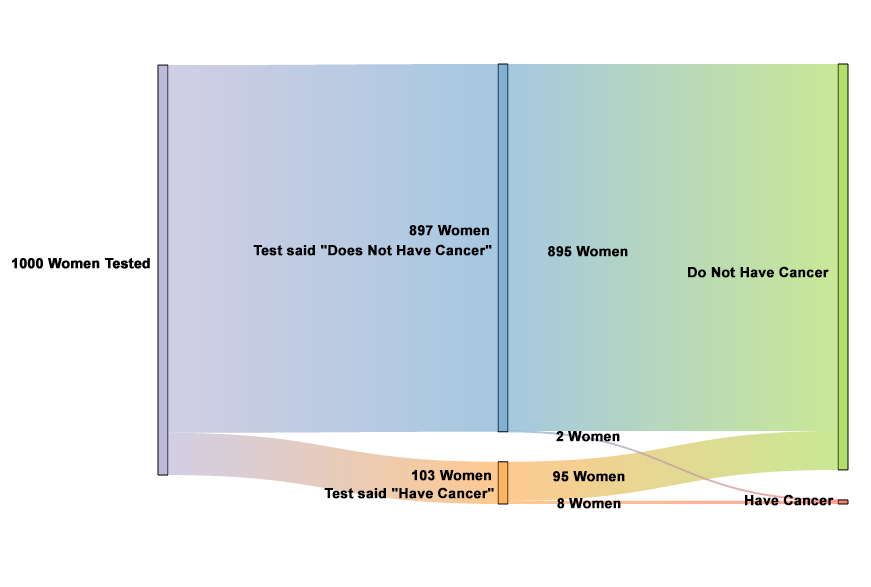
<style>
.page{position:relative;width:871px;height:587px;background:#ffffff}
.page>*{position:absolute;margin:0}
.t1{font:14px "Arial-BoldMT";color:#000000;font-weight:bold}
</style>
<div class="page">
<p class="t1" style="left:409px;top:225px;width:80px;height:11px">897 Women</p>
<p class="t1" style="left:253px;top:244px;width:239px;height:12px">Test said "Does Not Have Cancer"</p>
<p class="t1" style="left:548px;top:246px;width:80px;height:11px">895 Women</p>
<p class="t1" style="left:688px;top:266px;width:141px;height:12px">Do Not Have Cancer</p>
<p class="t1" style="left:556px;top:431px;width:64px;height:11px">2 Women</p>
<p class="t1" style="left:412px;top:470px;width:79px;height:11px">103 Women</p>
<p class="t1" style="left:553px;top:471px;width:72px;height:11px">95 Women</p>
<p class="t1" style="left:324px;top:487px;width:170px;height:12px">Test said "Have Cancer"</p>
<p class="t1" style="left:745px;top:494px;width:89px;height:12px">Have Cancer</p>
<p class="t1" style="left:557px;top:498px;width:64px;height:11px">8 Women</p>
</div>
